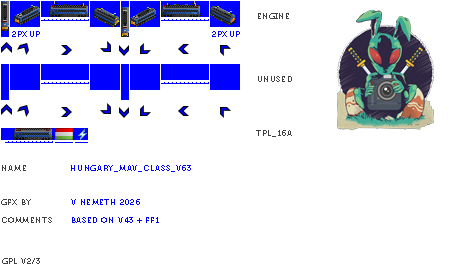
<style>
.page{position:relative;width:450px;height:280px;background:#ffffff}
.page>*{position:absolute;margin:0}
.t1{font:8px "Museo700-Regular";letter-spacing:0.075em;color:#404040;text-transform:uppercase}
.t2{font:8px "Museo700-Regular";color:#0000ff;text-transform:uppercase}
.t3{font:8px "Museo700-Regular";letter-spacing:0.075em;color:#0000ff;text-transform:uppercase}
</style>
<div class="page">
<p class="t1" style="left:258px;top:13px;width:31px;height:6px">ENGINE</p>
<p class="t2" style="left:12px;top:31px;width:28px;height:6px">2px up</p>
<p class="t2" style="left:212px;top:31px;width:28px;height:6px">2px up</p>
<p class="t1" style="left:258px;top:76px;width:34px;height:6px">UNUSED</p>
<p class="t1" style="left:256px;top:130px;width:36px;height:7px">tpl_16a</p>
<p class="t1" style="left:2px;top:165px;width:24px;height:6px">name</p>
<p class="t3" style="left:71px;top:165px;width:120px;height:7px">Hungary_MAV_Class_V63</p>
<p class="t1" style="left:1px;top:199px;width:30px;height:6px">gfx by</p>
<p class="t3" style="left:71px;top:199px;width:69px;height:6px">V NEMETH 2026</p>
<p class="t1" style="left:2px;top:217px;width:50px;height:6px">comments</p>
<p class="t3" style="left:72px;top:217px;width:87px;height:6px">BASED ON V43 + FF1</p>
<p class="t1" style="left:2px;top:258px;width:38px;height:6px">gpl v2/3</p>
</div>
